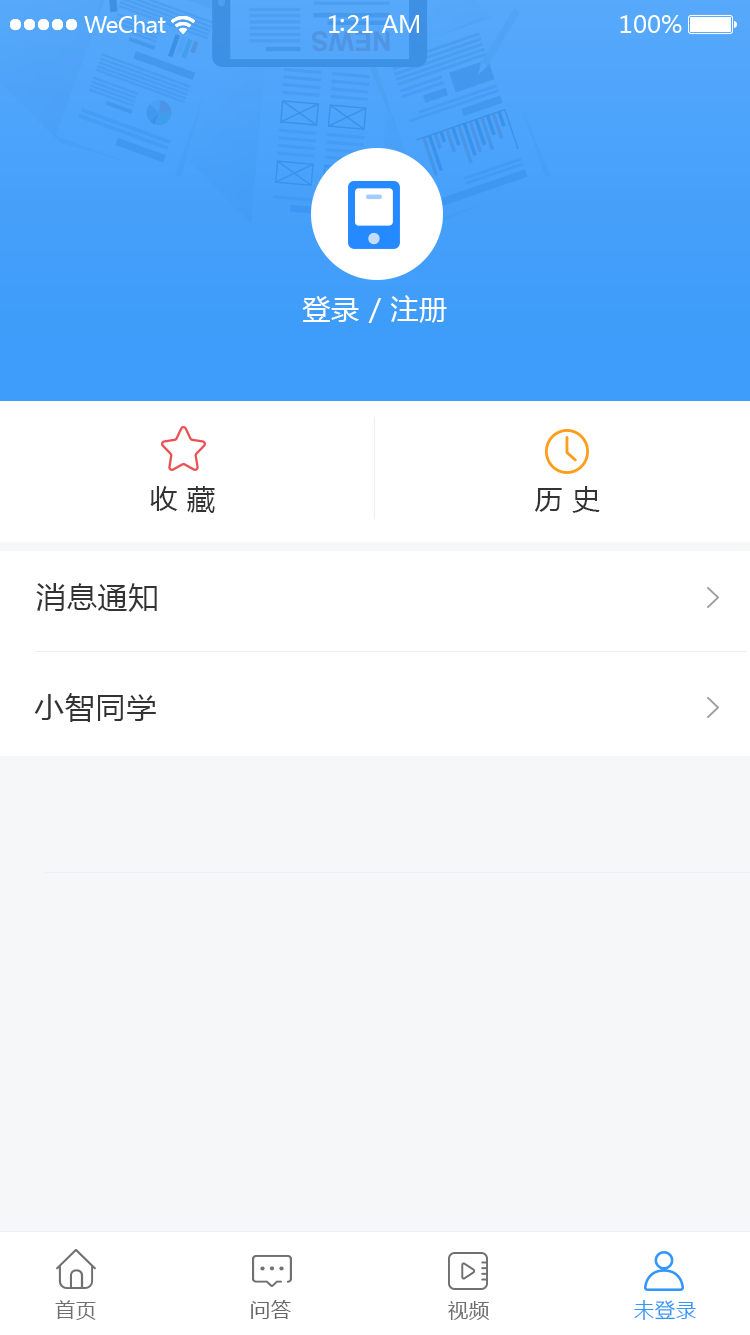
<style>
.page{position:relative;width:750px;height:1335px;background:#f5f7f9}
.page>*{position:absolute;margin:0}
.t1{font:28px "MicrosoftYaHei";letter-spacing:0.025em;color:#ffffff}
.t2{font:28px "MicrosoftYaHei";letter-spacing:0.025em;color:#333333}
.t3{font:30px "MicrosoftYaHei";letter-spacing:0.025em;color:#333333}
.t4{font:20px "MicrosoftYaHei";letter-spacing:0.05em;color:#707070}
.t5{font:20px "MicrosoftYaHei";letter-spacing:0.05em;color:#666666}
.t6{font:20px "MicrosoftYaHei";letter-spacing:0.05em;color:#3296fa}
</style>
<div class="page">
<p class="t1" style="left:302px;top:295px;width:145px;height:28px">登录 / 注册</p>
<p class="t2" style="left:150px;top:486px;width:65px;height:27px">收 藏</p>
<p class="t2" style="left:534px;top:486px;width:66px;height:27px">历 史</p>
<p class="t3" style="left:36px;top:583px;width:121px;height:29px">消息通知</p>
<p class="t3" style="left:34px;top:693px;width:122px;height:29px">小智同学</p>
<p class="t4" style="left:55px;top:1300px;width:41px;height:20px">首页</p>
<p class="t5" style="left:251px;top:1300px;width:40px;height:19px">问答</p>
<p class="t4" style="left:448px;top:1301px;width:41px;height:19px">视频</p>
<p class="t6" style="left:634px;top:1300px;width:62px;height:20px">未登录</p>
</div>
